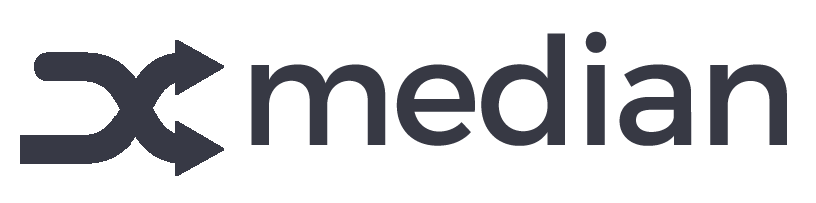
<style>
.page{position:relative;width:816px;height:203px;background:#ffffff}
.page>*{position:absolute;margin:0}
.t1{font:150px "Montserrat-Regular";letter-spacing:-0.025em;color:#373944}
</style>
<div class="page">
<p class="t1" style="left:251px;top:31px;width:536px;height:115px">median</p>
</div>
